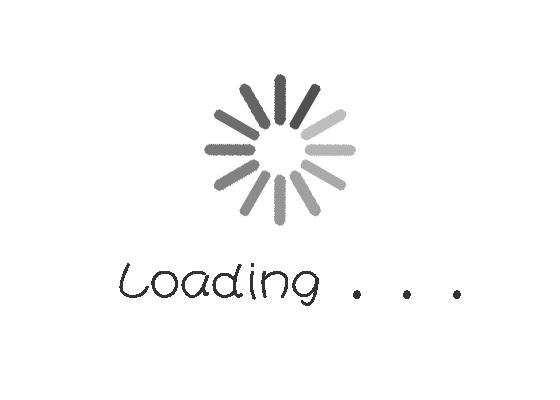
<style>
.page{position:relative;width:560px;height:400px;background:#ffffff}
.page>*{position:absolute;margin:0}
.t1{font:50px "Íò»¨¸çÌØÌå·±";color:#323232}
</style>
<div class="page">
<p class="t1" style="left:119px;top:263px;width:342px;height:43px">Loading . . .</p>
</div>
